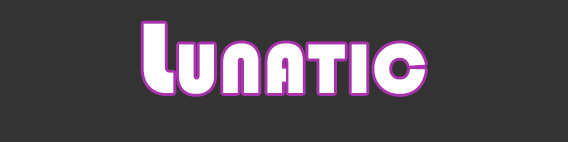
<style>
.page{position:relative;width:568px;height:142px;background:#333333}
.page>*{position:absolute;margin:0}
.t1{font:103.7px "STHupo";letter-spacing:0.02em;color:#ffffff;font-variant:small-caps}
</style>
<div class="page">
<p class="t1" style="left:143px;top:23px;width:282px;height:71px">Lunatic</p>
</div>
